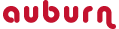
<style>
.page{position:relative;width:119px;height:29px;background:#ffffff}
.page>*{position:absolute;margin:0}
.t1{font:30px "AlbaMatter";letter-spacing:0.141em;color:#c3122e}
</style>
<div class="page">
<p class="t1" style="left:3px;top:0px;width:113px;height:29px">auburn</p>
</div>
